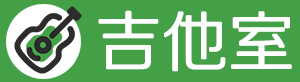
<style>
.page{position:relative;width:300px;height:82px;background:#43a047}
.page>*{position:absolute;margin:0}
.t1{font:64.8px "FZZXHJW--GB1-0";color:#ffffff;font-weight:bold}
</style>
<div class="page">
<p class="t1" style="left:98px;top:10px;width:194px;height:62px">吉他室</p>
</div>
